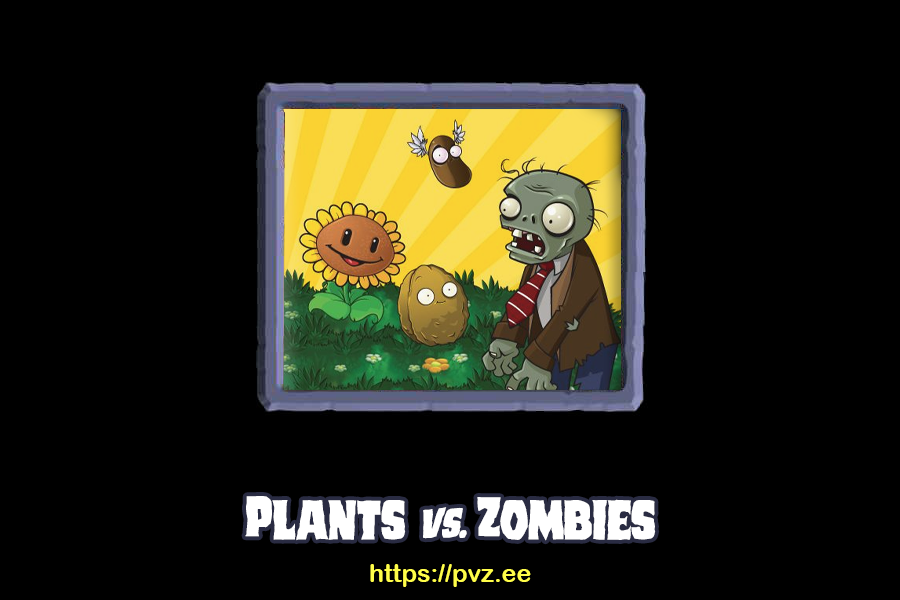
<style>
.page{position:relative;width:900px;height:600px;background:#000000}
.page>*{position:absolute;margin:0}
.t1{font:60px "DuskDemonStaggered";color:#ffffff}
.t2{font:45px "DuskDemonRotalic";color:#ffffff}
.t3{font:24.8px "ArialRoundedMTBold";color:#fffd49}
</style>
<div class="page">
<p class="t1" style="left:245px;top:496px;width:411px;height:45px">Plants <span class="t2">vs.</span> Zombies</p>
<p class="t3" style="left:370px;top:564px;width:161px;height:23px">https://pvz.ee</p>
</div>
